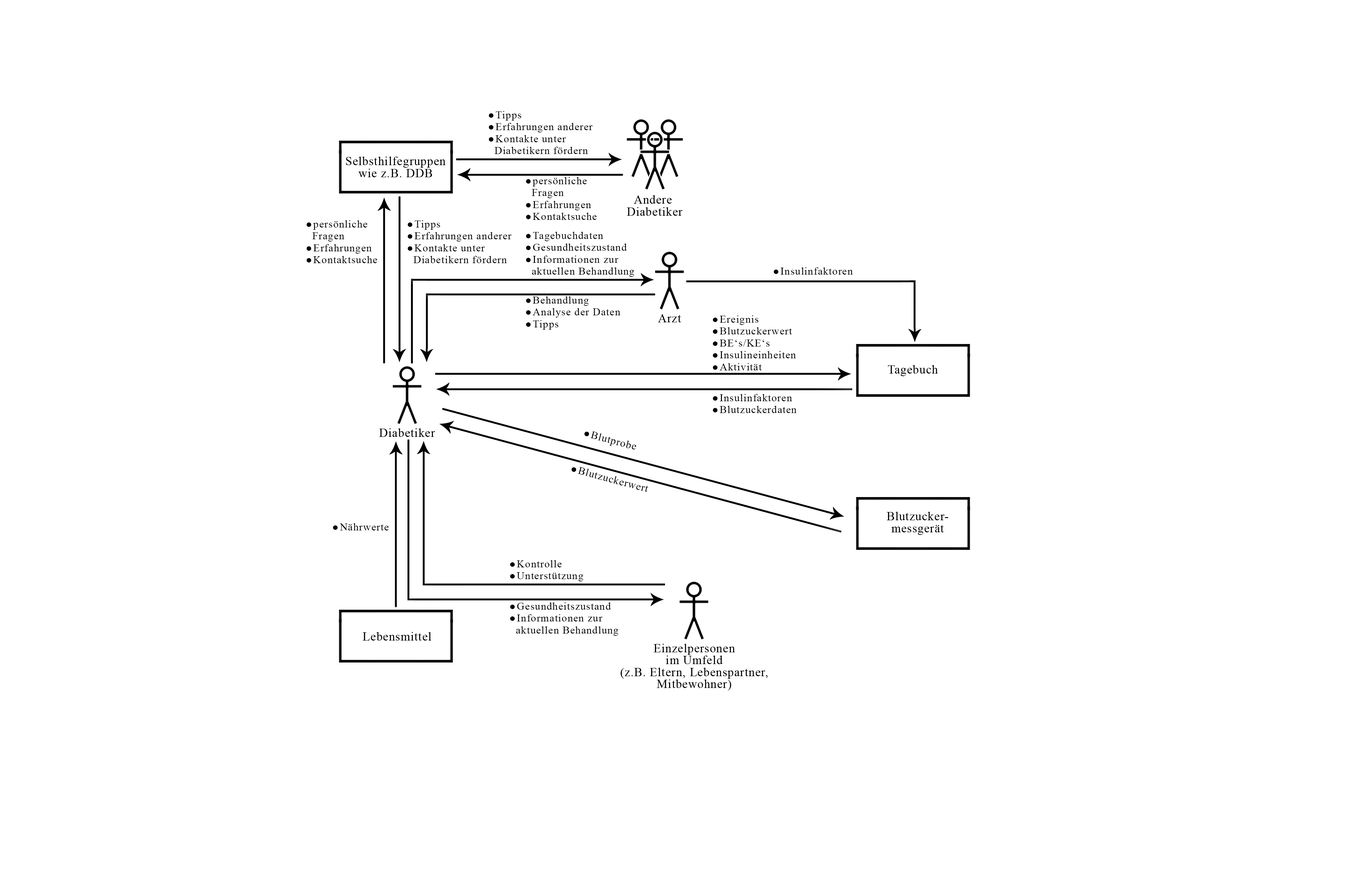
<style>
.page{position:relative;width:1371px;height:870px;background:#ffffff}
.page>*{position:absolute;margin:0}
.t1{font:10.6px/11.9px "TimesNewRomanPSMT";letter-spacing:0.05em;color:#000000}
.t2{font:8px/11.9px "Wingdings-Regular";letter-spacing:0.2em;color:#000000}
.t3{font:10.6px "TimesNewRomanPSMT";letter-spacing:0.05em;color:#000000}
.t4{font:8px "Wingdings-Regular";letter-spacing:0.2em;color:#000000}
</style>
<div class="page">
<p class="t1" style="left:489px;top:111px;width:104px;height:43px"><span class="t2">l</span>Tipps<br><span class="t2">l</span>Erfahrungen anderer <br><span class="t2">l</span>Kontakte unter <br>  Diabetikern fördern</p>
<p class="t1" style="left:526px;top:177px;width:71px;height:43px"><span class="t2">l</span>persönliche <br>  Fragen<br><span class="t2">l</span>Erfahrungen <br><span class="t2">l</span>Kontaktsuche</p>
<p class="t1" style="left:307px;top:220px;width:70px;height:43px"><span class="t2">l</span>persönliche <br>  Fragen<br><span class="t2">l</span>Erfahrungen <br><span class="t2">l</span>Kontaktsuche</p>
<p class="t1" style="left:408px;top:220px;width:104px;height:43px"><span class="t2">l</span>Tipps<br><span class="t2">l</span>Erfahrungen anderer <br><span class="t2">l</span>Kontakte unter <br>  Diabetikern fördern</p>
<p class="t1" style="left:526px;top:232px;width:108px;height:45px"><span class="t2">l</span>Tagebuchdaten<br><span class="t2">l</span>Gesundheitszustand <br><span class="t2">l</span>Informationen zur<br>  aktuellen Behandlung</p>
<p class="t3" style="left:774px;top:267px;width:79px;height:7px"><span class="t4">l</span>Insulinfaktoren</p>
<p class="t1" style="left:526px;top:296px;width:95px;height:34px"><span class="t2">l</span>Behandlung<br><span class="t2">l</span>Analyse der Daten<br><span class="t2">l</span>Tipps</p>
<p class="t1" style="left:713px;top:315px;width:83px;height:55px"><span class="t2">l</span>Ereignis<br><span class="t2">l</span>Blutzuckerwert<br><span class="t2">l</span>BE‘s/KE‘s<br><span class="t2">l</span>Insulineinheiten<br><span class="t2">l</span>Aktivität</p>
<p class="t1" style="left:713px;top:394px;width:84px;height:19px"><span class="t2">l</span>Insulinfaktoren<br><span class="t2">l</span>Blutzuckerdaten</p>
<p class="t3" style="left:584px;top:431px;width:52px;height:18px;rotate:15deg"><span class="t4">l</span>Blutprobe</p>
<p class="t3" style="left:572px;top:466px;width:77px;height:26px;rotate:15deg"><span class="t4">l</span>Blutzuckerwert</p>
<p class="t3" style="left:333px;top:523px;width:56px;height:8px"><span class="t4">l</span>Nährwerte</p>
<p class="t1" style="left:510px;top:560px;width:73px;height:21px"><span class="t2">l</span>Kontrolle<br><span class="t2">l</span>Unterstützung</p>
<p class="t1" style="left:510px;top:602px;width:108px;height:34px"><span class="t2">l</span>Gesundheitszustand<br><span class="t2">l</span>Informationen zur<br>  aktuellen Behandlung</p>
</div>
